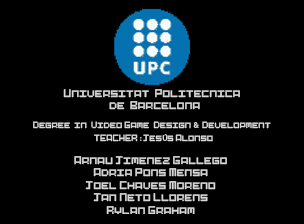
<style>
.page{position:relative;width:304px;height:224px;background:#000000}
.page>*{position:absolute;margin:0}
.t1{font:10.4px "Pixel-Art";color:#d7d7d7}
.t2{font:8.3px "Pixel-Art";color:#d7d7d7}
.t3{font:8.3px "MyriadPro-Regular";color:#d7d7d7}
</style>
<div class="page">
<p class="t1" style="left:63px;top:89px;width:177px;height:21px;text-align:center">Universitat  Politecnica  <br>de  Barcelona</p>
<p class="t2" style="left:33px;top:121px;width:238px;height:8px">Degree  in  Video Game  Design <span class="t3">&amp; </span> Development</p>
<p class="t2" style="left:94px;top:134px;width:119px;height:8px">TEACHER <span class="t3">: </span>Jes<span class="t3">Ú</span>s Alonso</p>
<p class="t1" style="left:74px;top:156px;width:153px;height:58px;text-align:center">Arnau Jimenez Gallego<br>Adria Pons Mensa<br>Joel Chaves Moreno<br>Jan Neto Llorens<br>Rylan Graham</p>
</div>
